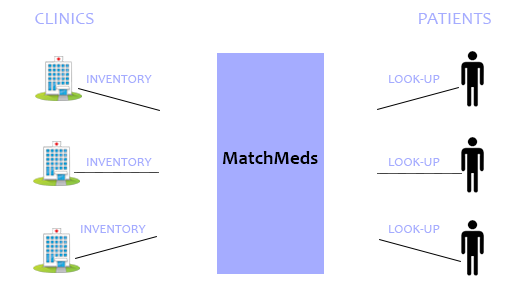
<style>
.page{position:relative;width:532px;height:300px;background:#ffffff}
.page>*{position:absolute;margin:0}
.t1{font:18px "Candara";color:#a5acff}
.t2{font:13px "Candara";color:#a5acff}
.t3{font:19px "Candara-Bold";color:#000000}
</style>
<div class="page">
<p class="t1" style="left:35px;top:13px;width:59px;height:11px">CLINICS</p>
<p class="t1" style="left:419px;top:13px;width:72px;height:11px">PATIENTS</p>
<p class="t2" style="left:87px;top:75px;width:65px;height:8px">INVENTORY</p>
<p class="t2" style="left:389px;top:75px;width:51px;height:8px">LOOK-UP</p>
<p class="t2" style="left:87px;top:158px;width:65px;height:8px">INVENTORY</p>
<p class="t3" style="left:222px;top:151px;width:96px;height:13px">MatchMeds</p>
<p class="t2" style="left:389px;top:158px;width:51px;height:8px">LOOK-UP</p>
<p class="t2" style="left:81px;top:225px;width:65px;height:8px">INVENTORY</p>
<p class="t2" style="left:389px;top:225px;width:51px;height:8px">LOOK-UP</p>
</div>
